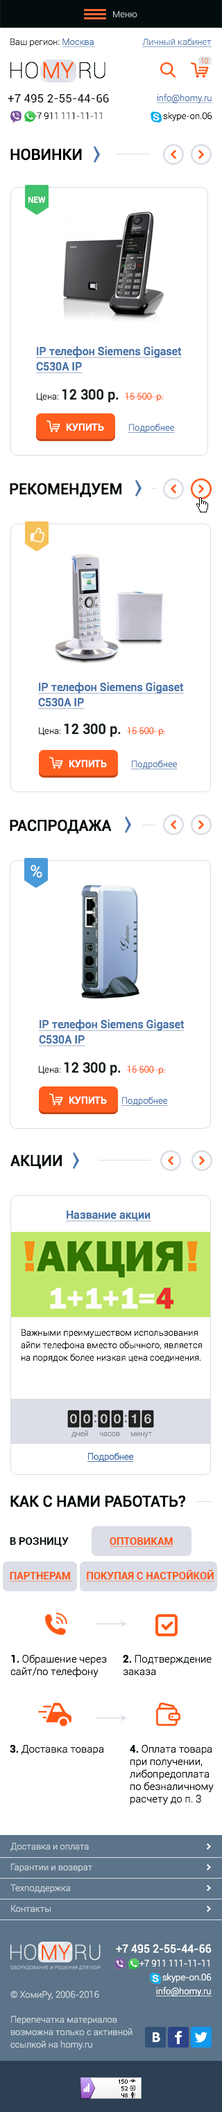
<style>
.page{position:relative;width:222px;height:2112px;background:#ffffff}
.page>*{position:absolute;margin:0}
.t1{font:9px "Roboto-Light";color:#bdc3c5}
.t2{font:9px "Roboto-Light";color:#323232}
.t3{font:9px "Roboto-Light";color:#4673ab}
.t4{font:9px "Roboto-Light";color:#4673ab;text-decoration:underline}
.t5{font:22.2px "Roboto-Thin";color:#040d0d;text-transform:uppercase}
.t6{font:22.2px "Roboto-Thin";letter-spacing:0.14em;color:#040d0d;text-transform:uppercase}
.t7{font:22.2px "Roboto-Light";color:#ff5816;text-transform:uppercase}
.t8{font:22.2px "Roboto-Light";letter-spacing:0.14em;color:#ff5816;text-transform:uppercase}
.t9{font:6.9px "Roboto-Light"}
.t10{font:11.8px "Roboto-Regular";color:#040d0d}
.t11{font:9px "Roboto-Light";color:#040d0d}
.t12{font:15.2px "Roboto-Medium";color:#000000;text-transform:uppercase}
.t13{font:8.3px "Roboto-Medium";color:#ffffff;text-transform:uppercase}
.t14{font:11.1px/15.2px "Roboto-Medium";color:#4673ab;text-decoration:underline}
.t15{font:9px "Roboto-Light";color:#ff5816}
.t16{font:9px "Roboto-Light";color:#1a2222}
.t17{font:13.8px "Roboto-Medium";color:#1a2222}
.t18{font:9.7px "Roboto-Medium";color:#ffffff;text-transform:uppercase}
.t19{font:15.2px "Roboto-Medium";color:#040d0d;text-transform:uppercase}
.t20{font:16.6px "Roboto-Light";color:#ffffff;text-transform:uppercase}
.t21{font:11.1px "Roboto-Medium";color:#4673ab;text-decoration:underline}
.t22{font:9px/12.5px "Roboto-Light";color:#040d0d}
.t23{font:7.6px "Roboto-Light";color:#7f8686}
.t24{font:10.4px/34.6px "Roboto-Bold";color:#ff5816;text-transform:uppercase}
.t25{font:10.4px/12.5px "Roboto-Bold";color:#040d0d;text-transform:uppercase}
.t26{font:10.4px/12.5px "Roboto-Bold";color:#ff5816;text-transform:uppercase}
.t27{font:10.4px/12.5px "Roboto-Light";color:#040d0d}
.t28{font:10.4px/12.5px "Roboto-Bold";color:#040d0d}
.t29{font:10.4px "Roboto-Light";color:#040d0d}
.t30{font:10.4px "Roboto-Bold";color:#040d0d}
.t31{font:9px/20.8px "Roboto-Light";color:#c8d4dc}
.t32{font:9px/13.8px "Roboto-Light";color:#ffffff}
.t33{font:11.1px/13.8px "Roboto-Regular";color:#ffffff}
.t34{font:9px/13.8px "Roboto-Light";color:#ffffff;text-decoration:underline}
.t35{font:9px/12.5px "Roboto-Light";color:#c8d4dc}
</style>
<div class="page">
<p class="t1" style="left:113px;top:11px;width:24px;height:6px">Меню</p>
<p class="t2" style="left:10px;top:38px;width:83px;height:9px">Ваш регион: <span class="t3">Москва</span></p>
<p class="t4" style="left:142px;top:38px;width:69px;height:9px">Личный кабинет</p>
<p class="t5" style="left:10px;top:62px;width:95px;height:17px">H<span class="t6">O</span><span class="t7">M</span><span class="t8">y</span>RU</p>
<p class="t9" style="left:201px;top:58px;width:7px;height:6px">10</p>
<p class="t10" style="left:8px;top:94px;width:101px;height:8px">+7 495 2-55-44-66</p>
<p class="t4" style="left:156px;top:93px;width:56px;height:10px"><span class="t11"><br></span>info@homy.ru</p>
<p class="t11" style="left:32px;top:111px;width:180px;height:10px">+7 911 111-11-11                           skype-on.06</p>
<p class="t12" style="left:10px;top:148px;width:72px;height:13px">Новинки</p>
<p class="t13" style="left:28px;top:197px;width:18px;height:6px">New</p>
<p class="t14" style="left:36px;top:346px;width:145px;height:27px;text-align:right">IP телефон Siemens Gigaset C530A IP</p>
<p class="t15" style="left:36px;top:389px;width:127px;height:14px"><span class="t16">Цена: </span><span class="t17">12 300 р.  </span>15 500  р.</p>
<p class="t18" style="left:66px;top:423px;width:38px;height:8px">Купить</p>
<p class="t4" style="left:128px;top:423px;width:46px;height:10px">Подробнее</p>
<p class="t19" style="left:10px;top:483px;width:112px;height:14px">Рекомендуем</p>
<p class="t14" style="left:38px;top:682px;width:145px;height:27px;text-align:right">IP телефон Siemens Gigaset C530A IP</p>
<p class="t15" style="left:38px;top:723px;width:127px;height:14px"><span class="t16">Цена: </span><span class="t17">12 300 р.  </span>15 500  р.</p>
<p class="t18" style="left:69px;top:759px;width:38px;height:9px">Купить</p>
<p class="t4" style="left:131px;top:759px;width:46px;height:10px">Подробнее</p>
<p class="t19" style="left:10px;top:819px;width:101px;height:15px">Распродажа</p>
<p class="t20" style="left:30px;top:865px;width:12px;height:13px">%</p>
<p class="t14" style="left:39px;top:1019px;width:145px;height:27px;text-align:right">IP телефон Siemens Gigaset C530A IP</p>
<p class="t15" style="left:38px;top:1062px;width:127px;height:14px"><span class="t16">Цена: </span><span class="t17">12 300 р.  </span>15 500  р.</p>
<p class="t18" style="left:69px;top:1096px;width:38px;height:8px">Купить</p>
<p class="t4" style="left:121px;top:1096px;width:47px;height:10px">Подробнее</p>
<p class="t19" style="left:10px;top:1154px;width:52px;height:15px">Акции</p>
<p class="t21" style="left:66px;top:1210px;width:85px;height:11px">Название акции</p>
<p class="t22" style="left:21px;top:1329px;width:180px;height:33px;text-align:right">Важными преимуществом использования айпи телефона вместо обычного, является<br>на порядок более низкая цена соединения.</p>
<p class="t23" style="left:71px;top:1430px;width:17px;height:7px">дней</p>
<p class="t23" style="left:99px;top:1432px;width:21px;height:5px">часов</p>
<p class="t23" style="left:130px;top:1432px;width:22px;height:6px">минут</p>
<p class="t4" style="left:87px;top:1452px;width:47px;height:9px">Подробнее</p>
<p class="t4" style="left:87px;top:1452px;width:47px;height:9px">Подробнее</p>
<p class="t19" style="left:10px;top:1495px;width:176px;height:12px">Как с нами работать?</p>
<p class="t24" style="left:10px;top:1537px;width:203px;height:42px;text-align:right"><span class="t25">В розницу  </span><span class="t26">Оптовикам<br></span>Партнерам      Покупая с настройкой</p>
<p class="t27" style="left:10px;top:1654px;width:97px;height:23px;text-align:right"><span class="t28">1. </span>Обращение через<br>сайт/по телефону</p>
<p class="t27" style="left:123px;top:1654px;width:88px;height:21px;text-align:right"><span class="t28">2. </span>Подтверждение<br>заказа</p>
<p class="t29" style="left:10px;top:1744px;width:94px;height:10px"><span class="t30">3. </span>Доставка товара</p>
<p class="t27" style="left:129px;top:1744px;width:84px;height:61px;text-align:right"><span class="t28">4. </span>Оплата товара<br>при получении,<br>либопредоплата<br>по безналичному<br>расчету до п. 3</p>
<p class="t31" style="left:10px;top:1842px;width:82px;height:70px;text-align:right">Доставка и оплата<br>Гарантии и возврат<br>Техподдержка<br>Контакты</p>
<p class="t32" style="left:116px;top:1943px;width:95px;height:53px"><span class="t33">+7 495 2-55-44-66<br></span>+7 911 111-11-11    <br>                   skype-on.06<br><span class="t34">info@homy.ru</span></p>
<p class="t35" style="left:10px;top:1990px;width:122px;height:59px;text-align:right">© ХомиРу, 2006-2016<br><br>Перепечатка материалов<br>возможна только с активной<br>ссылкой на homy.ru</p>
</div>
